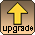
<style>
.page{position:relative;width:35px;height:35px}
.page>*{position:absolute;margin:0}
.t1{font:8px "Arial-BoldMT";color:#000000}
</style>
<div class="page">
<p class="t1" style="left:3px;top:25px;width:30px;height:8px">upgrade</p>
</div>
